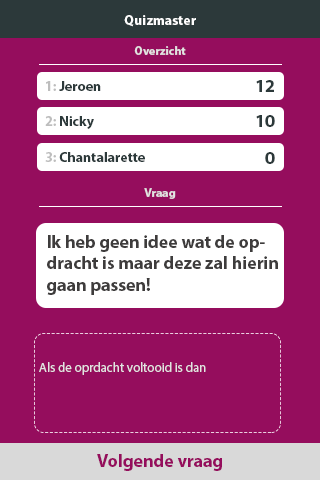
<style>
.page{position:relative;width:320px;height:480px;background:#950d5d}
.page>*{position:absolute;margin:0}
.t1{font:14px "MyriadPro-Bold";color:#fefefe}
.t2{font:12px "MyriadPro-Bold";color:#e3e3e3}
.t3{font:14px "MyriadPro-Bold"}
.t4{font:14px "MyriadPro-Bold";color:#2c393a}
.t5{font:14px "MyriadPro-Bold";color:#bdbdbd}
.t6{font:18px "MyriadPro-Bold";color:#2c393a}
.t7{font:18px "MyriadPro-Bold";color:#3e3c3c}
.t8{font:13px "MyriadPro-Regular";color:#e3e3e3}
.t9{font:18px "MyriadPro-Bold";color:#950d5d}
</style>
<div class="page">
<p class="t1" style="left:124px;top:15px;width:72px;height:12px">Quizmaster</p>
<p class="t1" style="left:124px;top:15px;width:72px;height:12px">Quizmaster</p>
<p class="t2" style="left:134px;top:46px;width:52px;height:9px">Overzicht</p>
<p class="t3" style="left:46px;top:81px;width:101px;height:13px">1: Playername....</p>
<p class="t4" style="left:46px;top:81px;width:55px;height:10px"><span class="t5">1: </span>Jeroen</p>
<p class="t6" style="left:256px;top:80px;width:18px;height:12px">12</p>
<p class="t4" style="left:45px;top:116px;width:49px;height:13px"><span class="t5">2: </span>Nicky</p>
<p class="t6" style="left:256px;top:115px;width:19px;height:12px">10</p>
<p class="t3" style="left:45px;top:152px;width:102px;height:13px">3: Playername....</p>
<p class="t4" style="left:45px;top:152px;width:100px;height:10px"><span class="t5">3: </span>Chantalarette</p>
<p class="t6" style="left:265px;top:152px;width:10px;height:12px">0</p>
<p class="t2" style="left:144px;top:188px;width:32px;height:11px">Vraag</p>
<p class="t7" style="left:47px;top:235px;width:231px;height:60px">Ik heb geen idee wat de opdracht is maar deze zal hierin gaan passen!</p>
<p class="t8" style="left:39px;top:362px;width:167px;height:13px">Als de oprdacht voltooid is dan</p>
<p class="t9" style="left:97px;top:454px;width:125px;height:17px">Volgende vraag</p>
</div>
